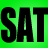
<style>
.page{position:relative;width:48px;height:48px;background:#000000}
.page>*{position:absolute;margin:0}
.t1{font:43.5px "Impact";letter-spacing:-0.025em;color:#000000;scale:0.77 1}
</style>
<div class="page">
<p class="t1" style="left:0px;top:7px;width:48px;height:36px">SAT</p>
</div>
